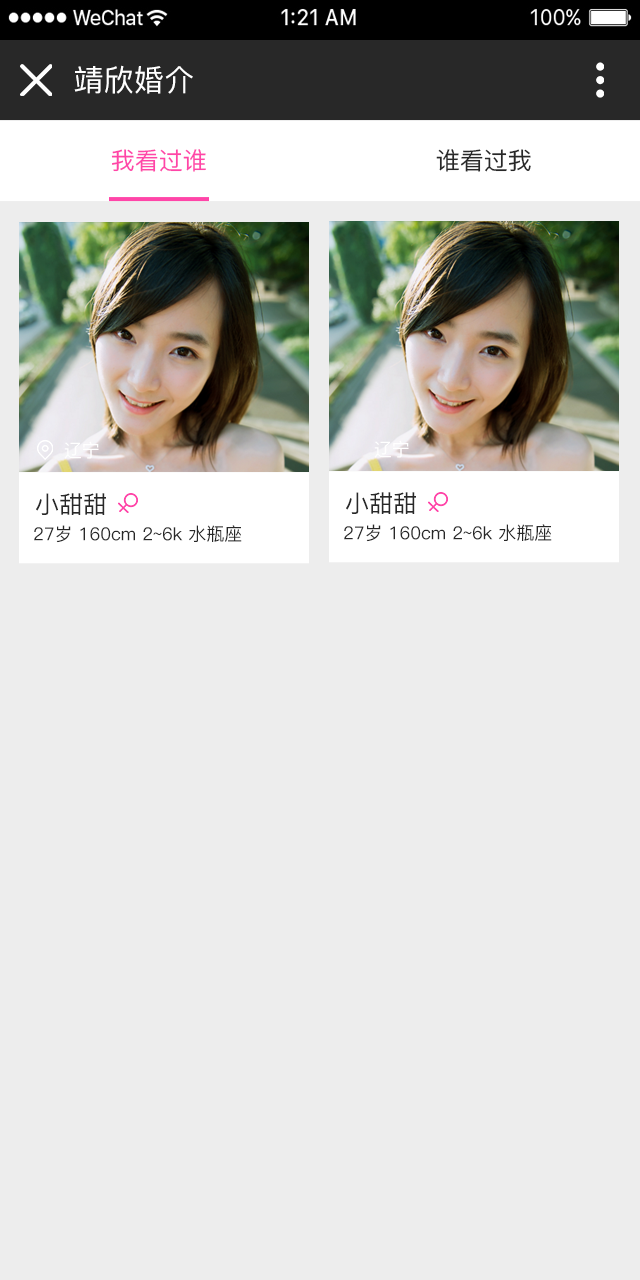
<style>
.page{position:relative;width:640px;height:1280px;background:#ededed}
.page>*{position:absolute;margin:0}
.t1{font:30px "PingFang-SC-Medium";letter-spacing:0.01em;color:#ffffff;text-transform:uppercase}
.t2{font:24px "PingFang-SC-Medium";color:#ff45a8;text-transform:uppercase}
.t3{font:24px "PingFang-SC-Medium";color:#282828;text-transform:uppercase}
.t4{font:18px "PingFang-SC-Medium";color:#ffffff;text-transform:uppercase}
.t5{font:18px "PingFang-SC-Medium";color:#282828}
.t6{font:18px "PingFang-SC-Medium";color:#282828;text-transform:uppercase}
</style>
<div class="page">
<p class="t1" style="left:74px;top:65px;width:119px;height:29px">靖欣婚介</p>
<p class="t2" style="left:111px;top:149px;width:95px;height:23px">我看过谁</p>
<p class="t3" style="left:436px;top:149px;width:95px;height:23px">谁看过我</p>
<p class="t4" style="left:64px;top:441px;width:35px;height:18px">辽宁</p>
<p class="t4" style="left:374px;top:440px;width:35px;height:18px">辽宁</p>
<p class="t3" style="left:36px;top:493px;width:70px;height:22px">小甜甜</p>
<p class="t3" style="left:346px;top:492px;width:70px;height:22px">小甜甜</p>
<p class="t5" style="left:34px;top:525px;width:208px;height:18px"><span class="t6">27岁 160</span>cm 2~6k 水瓶座</p>
<p class="t5" style="left:344px;top:524px;width:208px;height:18px"><span class="t6">27岁 160</span>cm 2~6k 水瓶座</p>
</div>
